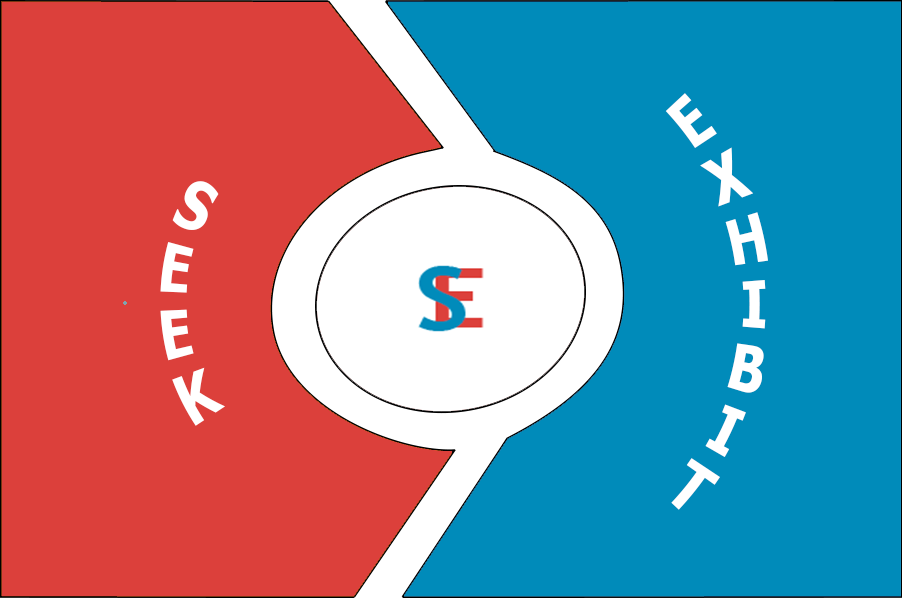
<style>
.page{position:relative;width:902px;height:598px;background:#008bba}
.page>*{position:absolute;margin:0}
.t1{font:54.2px "Tahoma-Bold";color:#ffffff}
</style>
<div class="page">
<p class="t1" style="left:665px;top:93px;width:103px;height:417px;text-align:center">EXHIBIT</p>
<p class="t1" style="left:160px;top:181px;width:65px;height:245px;text-align:center">SEEK</p>
</div>
